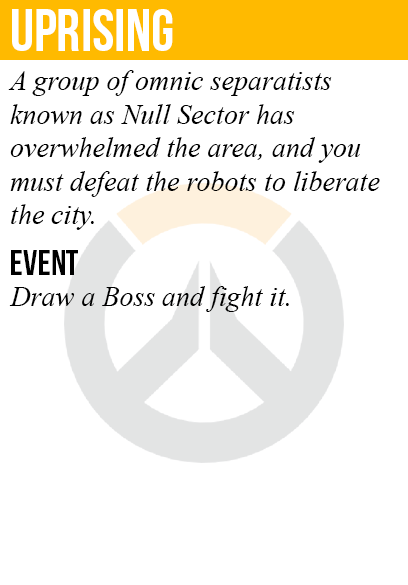
<style>
.page{position:relative;width:408px;height:585px;background:#ffffff}
.page>*{position:absolute;margin:0}
.t1{font:60px "BebasNeue";color:#ffffff}
.t2{font:28px "TimesNewRomanPS-ItalicMT";color:#000000}
.t3{font:36px "BebasNeue";color:#000000}
</style>
<div class="page">
<p class="t1" style="left:12px;top:9px;width:161px;height:42px">uprising</p>
<p class="t2" style="left:8px;top:70px;width:372px;height:160px">A group of omnic separatists<br>known as Null Sector has<br>overwhelmed the area, and you<br>must defeat the robots to liberate<br>the city.</p>
<p class="t3" style="left:11px;top:250px;width:67px;height:25px">event</p>
<p class="t2" style="left:9px;top:286px;width:280px;height:26px">Draw a Boss and fight it.</p>
</div>
